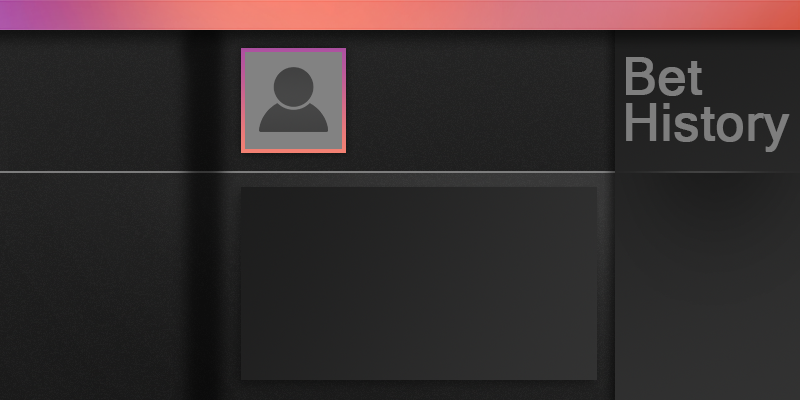
<style>
.page{position:relative;width:800px;height:400px}
.page>*{position:absolute;margin:0}
.t1{font:51px "MicrosoftSansSerif";color:#7e7e7e;font-weight:bold}
</style>
<div class="page">
<p class="t1" style="left:626px;top:57px;width:77px;height:39px">Bet</p>
<p class="t1" style="left:626px;top:103px;width:164px;height:49px">History</p>
</div>
